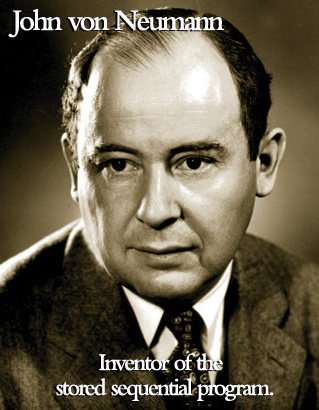
<style>
.page{position:relative;width:319px;height:410px}
.page>*{position:absolute;margin:0}
.t1{font:31.2px "BemboMT-SemiBold";letter-spacing:-0.08em;color:#ffffff;scale:0.95 1}
.t2{font:25px/25px "BemboMT-SemiBold";letter-spacing:-0.08em;color:#ffffff;scale:0.95 1}
</style>
<div class="page">
<p class="t1" style="left:8px;top:9px;width:216px;height:29px">John von Neumann</p>
<p class="t2" style="left:56px;top:353px;width:218px;height:48px;text-align:center">Inventor of the <br>stored sequential program.</p>
</div>
